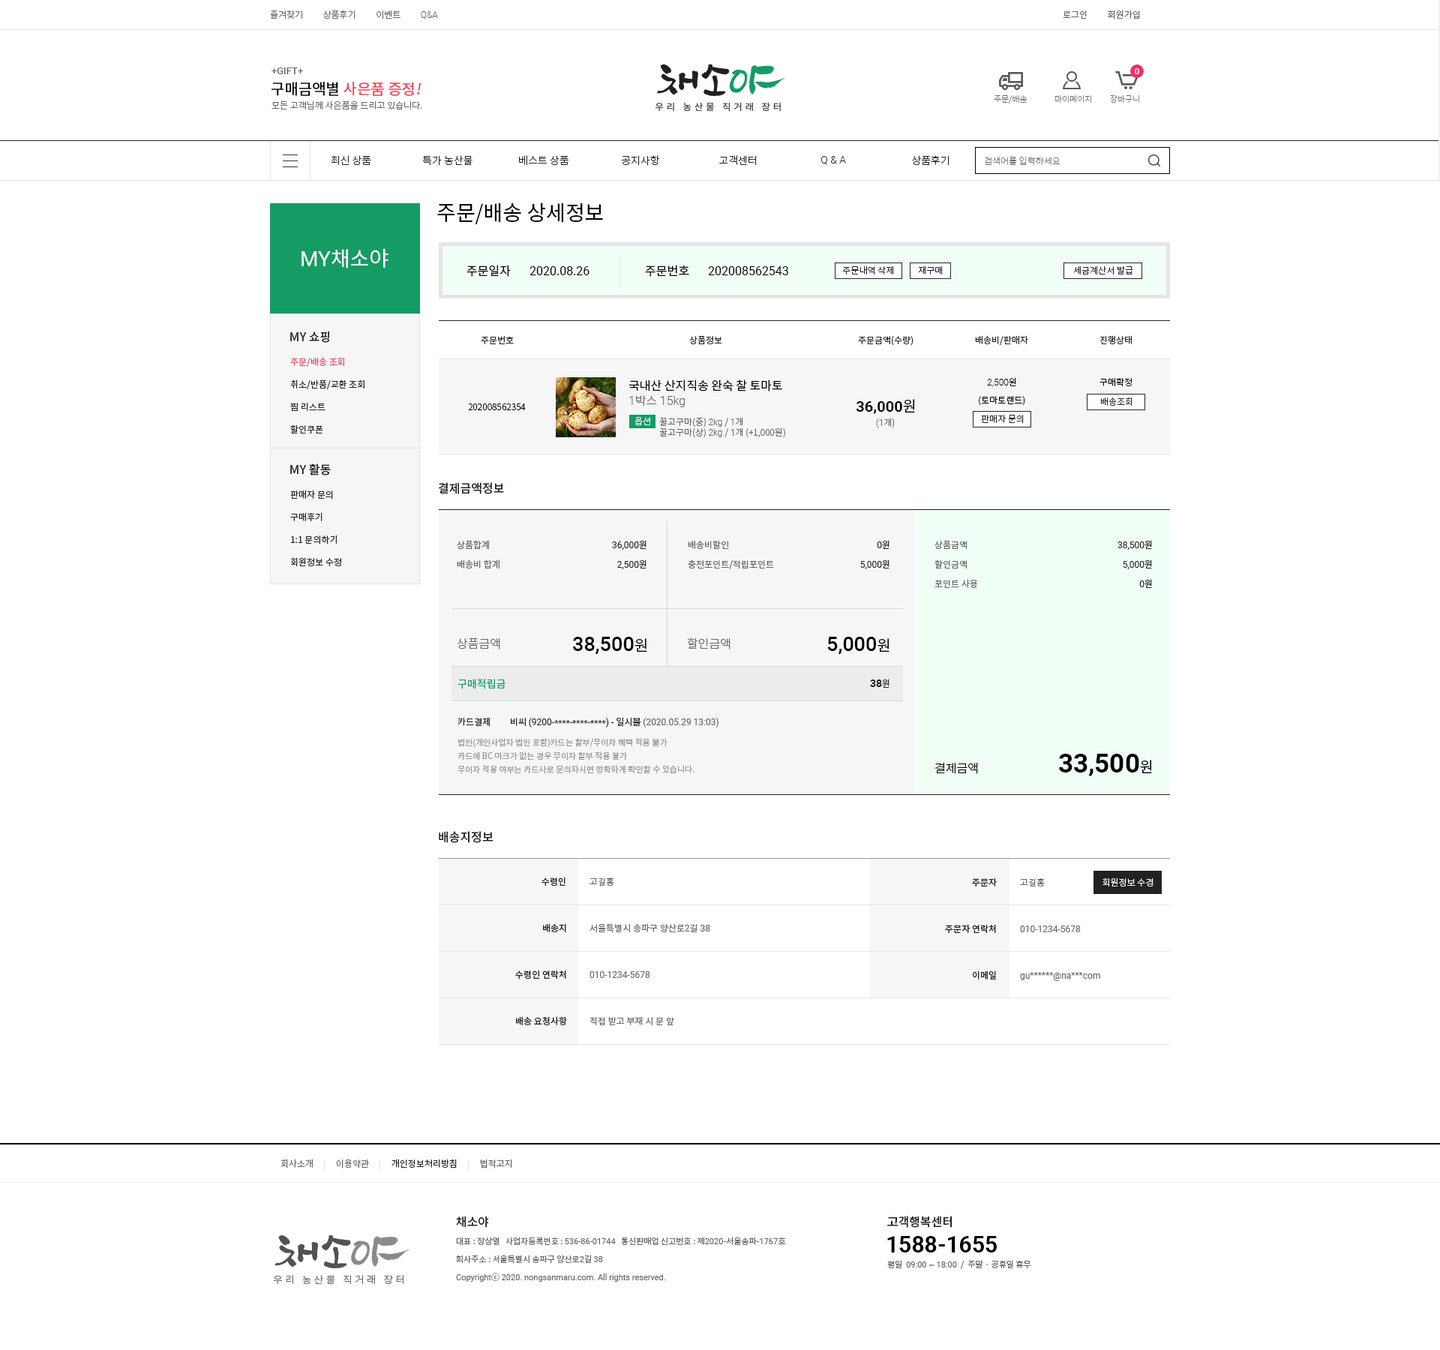
<style>
.page{position:relative;width:1440px;height:1350px;background:#ffffff}
.page>*{position:absolute;margin:0}
.t1{font:9px "NotoSansCJKkr-Light";color:#666666}
.t2{font:9px "Roboto-Light";color:#666666}
.t3{font:9px "NotoSansCJKkr-DemiLight";color:#666666}
.t4{font:9.8px "Roboto-Medium";color:#666666}
.t5{font:15px "NotoSansCJKkr-Medium";color:#ea475c}
.t6{font:15px "NotoSansCJKkr-Medium";color:#000000}
.t7{font:15px "NotoSansCJKkr-Medium";color:#ea475c;font-style:italic}
.t8{font:8.2px "NotoSansCJKkr-Thin";color:#666666}
.t9{font:10.5px "NotoSansCJKkr-Light";color:#222222}
.t10{font:10.5px "Roboto-Light";color:#222222}
.t11{font:9px "NotoSansCJKkr-Thin";color:#666666}
.t12{font:21px "NotoSansCJKkr-Regular";color:#000000}
.t13{font:21px "NotoSansCJKkr-Regular";color:#ffffff}
.t14{font:21px "Roboto-Regular";color:#ffffff}
.t15{font:12px "NotoSansCJKkr-Regular";color:#000000}
.t16{font:12px "Roboto-Regular";color:#000000}
.t17{font:9px "NotoSansCJKkr-Light";color:#222222}
.t18{font:12px "NotoSansCJKkr-Medium";color:#222222}
.t19{font:9px "NotoSansCJKkr-Regular";color:#222222}
.t20{font:9px/22.5px "NotoSansCJKkr-Regular";color:#222222}
.t21{font:9px/22.5px "NotoSansCJKkr-Regular";color:#ea475c}
.t22{font:9px/18px "NotoSansCJKkr-Light";color:#000000}
.t23{font:9px/18px "Roboto-Light";color:#000000}
.t24{font:9px "NotoSansCJKkr-Light";color:#000000}
.t25{font:12px "Roboto-Light";color:#666666}
.t26{font:12px "NotoSansCJKkr-Light";color:#666666}
.t27{font:15px "Roboto-Bold";color:#000000}
.t28{font:15px "NotoSansCJKkr-DemiLight";color:#000000}
.t29{font:9px "NotoSansCJKkr-Light";color:#ffffff}
.t30{font:9px/19.5px "NotoSansCJKkr-Regular";color:#666666}
.t31{font:9px/19.5px "Roboto-Regular";color:#222222}
.t32{font:9px/19.5px "NotoSansCJKkr-Regular";color:#222222}
.t33{font:20.2px "Roboto-Medium";color:#000000}
.t34{font:10.5px "NotoSansCJKkr-Regular";color:#159c65}
.t35{font:10.5px "Roboto-Bold";color:#222222}
.t36{font:9px "Roboto-Regular";color:#222222}
.t37{font:9px "Roboto-Regular";color:#666666}
.t38{font:8.2px/13.5px "NotoSansCJKkr-Regular";color:#999999}
.t39{font:26.2px "Roboto-Bold";color:#000000}
.t40{font:12px "NotoSansCJKkr-Light";color:#000000}
.t41{font:9px "NotoSansCJKkr-Medium";color:#222222}
.t42{font:9px "NotoSansCJKkr-Regular";color:#666666}
</style>
<div class="page">
<p class="t1" style="left:270px;top:10px;width:168px;height:10px">즐겨찾기          상품후기          이벤트          <span class="t2">Q&amp;A</span></p>
<p class="t3" style="left:1063px;top:10px;width:77px;height:10px">로그인          회원가입</p>
<p class="t4" style="left:272px;top:68px;width:31px;height:6px">+GIFT+</p>
<p class="t5" style="left:272px;top:82px;width:150px;height:14px"><span class="t6">구매금액별 </span>사은품 증정<span class="t7">!</span></p>
<p class="t1" style="left:272px;top:100px;width:150px;height:10px">모든 고객님께 사은품을 드리고 있습니다.</p>
<p class="t8" style="left:994px;top:94px;width:34px;height:10px">주문/배송</p>
<p class="t8" style="left:1054px;top:95px;width:38px;height:9px">마이페이지</p>
<p class="t8" style="left:1110px;top:94px;width:29px;height:10px">장바구니</p>
<p class="t9" style="left:331px;top:155px;width:40px;height:10px">최신 상품</p>
<p class="t9" style="left:422px;top:155px;width:50px;height:11px">특가 농산물</p>
<p class="t9" style="left:519px;top:155px;width:50px;height:11px">베스트 상품</p>
<p class="t9" style="left:622px;top:155px;width:38px;height:11px">공지사항</p>
<p class="t9" style="left:719px;top:155px;width:38px;height:11px">고객센터</p>
<p class="t10" style="left:821px;top:156px;width:25px;height:9px">Q &amp; A</p>
<p class="t9" style="left:912px;top:155px;width:38px;height:11px">상품후기</p>
<p class="t11" style="left:984px;top:156px;width:76px;height:10px">검색어를 입력하세요</p>
<p class="t12" style="left:437px;top:202px;width:166px;height:22px">주문/배송 상세정보</p>
<p class="t13" style="left:302px;top:248px;width:86px;height:20px"><span class="t14">MY</span>채소야</p>
<p class="t15" style="left:466px;top:265px;width:45px;height:12px">주문일자</p>
<p class="t16" style="left:530px;top:266px;width:60px;height:9px">2020.08.26</p>
<p class="t15" style="left:645px;top:265px;width:44px;height:12px">주문번호</p>
<p class="t16" style="left:708px;top:266px;width:80px;height:9px">202008562543</p>
<p class="t17" style="left:842px;top:266px;width:52px;height:8px">주문내역 삭제</p>
<p class="t17" style="left:918px;top:266px;width:25px;height:8px">재구매</p>
<p class="t17" style="left:1073px;top:266px;width:60px;height:9px">세금계산서 발급</p>
<p class="t18" style="left:290px;top:331px;width:39px;height:12px">MY 쇼핑</p>
<p class="t19" style="left:481px;top:336px;width:33px;height:8px">주문번호</p>
<p class="t19" style="left:689px;top:336px;width:33px;height:8px">상품정보</p>
<p class="t19" style="left:858px;top:336px;width:56px;height:10px">주문금액(수량)</p>
<p class="t19" style="left:975px;top:335px;width:53px;height:10px">배송비/판매자</p>
<p class="t19" style="left:1100px;top:335px;width:32px;height:9px">진행상태</p>
<p class="t20" style="left:290px;top:357px;width:74px;height:77px"><span class="t21">주문/배송 조회<br></span>취소/반품/교환 조회<br>찜 리스트<br>할인쿠폰</p>
<p class="t22" style="left:979px;top:377px;width:46px;height:29px;text-align:center"><span class="t23">2,500</span>원<br>(토마토랜드)</p>
<p class="t15" style="left:628px;top:380px;width:154px;height:12px">국내산 산지직송 완숙 찰 토마토</p>
<p class="t24" style="left:1100px;top:378px;width:32px;height:9px">구매확정</p>
<p class="t25" style="left:629px;top:395px;width:56px;height:12px">1<span class="t26">박스 </span>15kg</p>
<p class="t27" style="left:856px;top:399px;width:59px;height:15px">36,000<span class="t28">원</span></p>
<p class="t17" style="left:1100px;top:397px;width:32px;height:9px">배송조회</p>
<p class="t24" style="left:468px;top:404px;width:58px;height:6px">202008562354</p>
<p class="t29" style="left:634px;top:417px;width:16px;height:8px">옵션</p>
<p class="t1" style="left:659px;top:417px;width:126px;height:21px">꿀고구마(중) <span class="t2">2kg</span> / <span class="t2">1</span>개<br>꿀고구마(상) <span class="t2">2kg </span>/ <span class="t2">1</span>개 (+1,000원)</p>
<p class="t2" style="left:876px;top:418px;width:19px;height:10px">(1<span class="t1">개)</span></p>
<p class="t17" style="left:981px;top:415px;width:43px;height:9px">판매자 문의</p>
<p class="t18" style="left:290px;top:464px;width:41px;height:12px">MY 활동</p>
<p class="t18" style="left:438px;top:482px;width:66px;height:12px">결제금액정보</p>
<p class="t20" style="left:290px;top:490px;width:51px;height:76px">판매자 문의<br>구매후기<br>1:1 문의하기<br>회원정보 수정</p>
<p class="t30" style="left:457px;top:540px;width:43px;height:29px">상품합계<br>배송비 합계</p>
<p class="t31" style="left:612px;top:540px;width:34px;height:29px;text-align:right">36,000<span class="t32">원<br></span>2,500<span class="t32">원</span></p>
<p class="t30" style="left:688px;top:540px;width:86px;height:29px">배송비할인<br>충전포인트/적립포인트</p>
<p class="t31" style="left:860px;top:540px;width:30px;height:29px;text-align:right">0<span class="t32">원<br></span>5,000<span class="t32">원</span></p>
<p class="t30" style="left:934px;top:541px;width:44px;height:47px">상품금액<br>할인금액<br>포인트 사용</p>
<p class="t31" style="left:1118px;top:540px;width:34px;height:48px;text-align:right">38,500<span class="t32">원<br></span>5,000<span class="t32">원<br></span>0<span class="t32">원</span></p>
<p class="t26" style="left:458px;top:638px;width:42px;height:12px">상품금액</p>
<p class="t33" style="left:573px;top:637px;width:74px;height:18px">38,500<span class="t28">원</span></p>
<p class="t26" style="left:687px;top:638px;width:43px;height:12px">할인금액</p>
<p class="t33" style="left:827px;top:637px;width:63px;height:18px">5,000<span class="t28">원</span></p>
<p class="t34" style="left:458px;top:679px;width:48px;height:10px">구매적립금</p>
<p class="t35" style="left:870px;top:679px;width:20px;height:9px">38<span class="t19">원</span></p>
<p class="t19" style="left:458px;top:717px;width:32px;height:10px">카드결제</p>
<p class="t36" style="left:511px;top:717px;width:207px;height:11px"><span class="t19">비씨 </span>(9200-****-****-****)<span class="t19"> - 일시불 </span><span class="t37">(2020.05.29 13:03)</span></p>
<p class="t38" style="left:458px;top:738px;width:236px;height:36px">법인(개인사업자 법인 포함)카드는 할부/무이자 혜택 적용 불가<br>카드에 BC 마크가 없는 경우 무이자 할부 적용 불가<br>무이자 적용 여부는 카드사로 문의하시면 정확하게 확인할 수 있습니다.</p>
<p class="t39" style="left:1059px;top:754px;width:93px;height:22px">33,500<span class="t28">원</span></p>
<p class="t40" style="left:934px;top:763px;width:44px;height:11px">결제금액</p>
<p class="t18" style="left:439px;top:831px;width:55px;height:12px">배송지정보</p>
<p class="t41" style="left:542px;top:877px;width:24px;height:9px">수령인</p>
<p class="t42" style="left:590px;top:878px;width:24px;height:8px">고길홍</p>
<p class="t41" style="left:972px;top:878px;width:25px;height:8px">주문자</p>
<p class="t42" style="left:1020px;top:878px;width:25px;height:8px">고길홍</p>
<p class="t29" style="left:1102px;top:878px;width:52px;height:8px">회원정보 수경</p>
<p class="t41" style="left:543px;top:923px;width:23px;height:9px">배송지</p>
<p class="t42" style="left:590px;top:923px;width:120px;height:10px">서울특별시 송파구 양산로<span class="t37">2</span>길<span class="t37"> 38</span></p>
<p class="t41" style="left:945px;top:924px;width:51px;height:9px">주문자 연락처</p>
<p class="t37" style="left:1020px;top:926px;width:61px;height:6px">010-1234-5678</p>
<p class="t41" style="left:515px;top:970px;width:51px;height:10px">수령인 연락처</p>
<p class="t37" style="left:590px;top:971px;width:60px;height:7px">010-1234-5678</p>
<p class="t41" style="left:973px;top:970px;width:23px;height:10px">이메일</p>
<p class="t37" style="left:1020px;top:972px;width:80px;height:9px">gu******@na***com</p>
<p class="t41" style="left:516px;top:1016px;width:51px;height:9px">배송 요청사항</p>
<p class="t42" style="left:590px;top:1016px;width:84px;height:9px">직접 받고 부재 시 문 앞</p>
</div>
